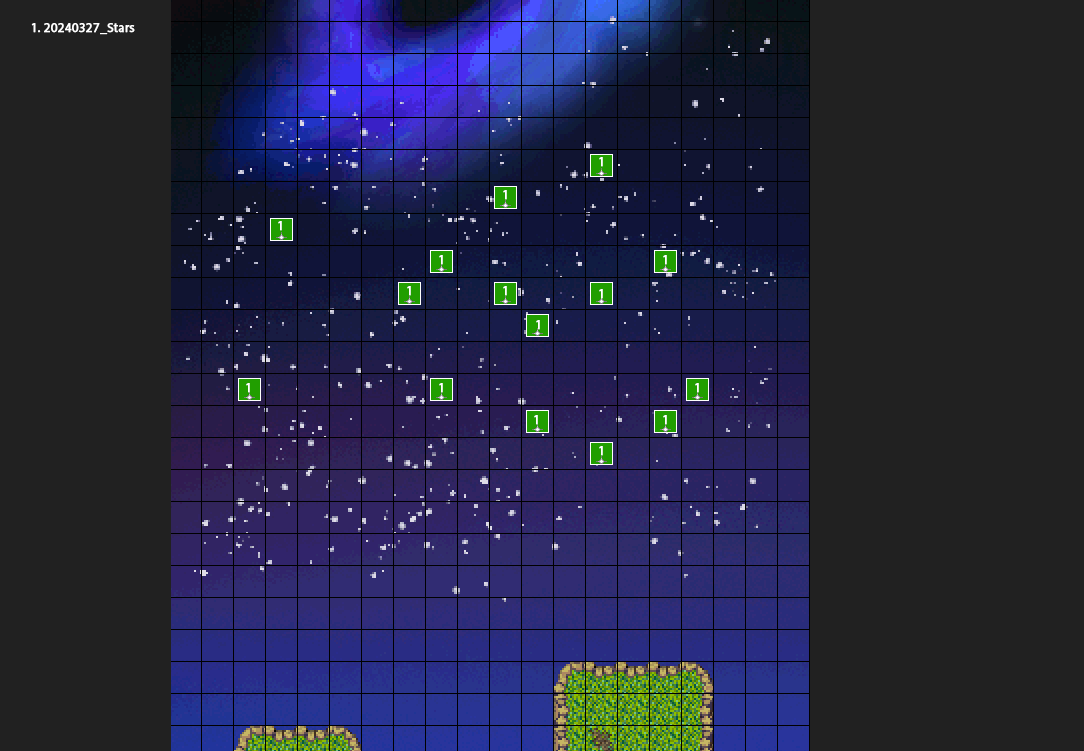
<style>
.page{position:relative;width:1084px;height:751px;background:#212121}
.page>*{position:absolute;margin:0}
.t1{font:13px "MyriadPro-Regular";color:#ffffff;font-weight:bold}
</style>
<div class="page">
<p class="t1" style="left:31px;top:23px;width:104px;height:12px">1. 20240327_Stars</p>
<p class="t1" style="left:599px;top:157px;width:4px;height:10px">1</p>
<p class="t1" style="left:503px;top:190px;width:4px;height:10px">1</p>
<p class="t1" style="left:278px;top:221px;width:4px;height:10px">1</p>
<p class="t1" style="left:439px;top:255px;width:4px;height:10px">1</p>
<p class="t1" style="left:663px;top:255px;width:4px;height:10px">1</p>
<p class="t1" style="left:407px;top:286px;width:4px;height:10px">1</p>
<p class="t1" style="left:503px;top:286px;width:4px;height:10px">1</p>
<p class="t1" style="left:599px;top:289px;width:4px;height:10px">1</p>
<p class="t1" style="left:536px;top:320px;width:4px;height:10px">1</p>
<p class="t1" style="left:246px;top:383px;width:4px;height:10px">1</p>
<p class="t1" style="left:439px;top:383px;width:4px;height:10px">1</p>
<p class="t1" style="left:695px;top:383px;width:4px;height:10px">1</p>
<p class="t1" style="left:534px;top:415px;width:4px;height:10px">1</p>
<p class="t1" style="left:663px;top:415px;width:4px;height:10px">1</p>
<p class="t1" style="left:599px;top:446px;width:4px;height:10px">1</p>
</div>
